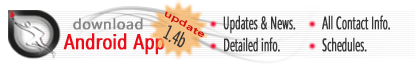
<style>
.page{position:relative;width:415px;height:64px;background:#ffffff}
.page>*{position:absolute;margin:0}
.t1{font:8.4px "SegoeUI";color:#d20f0f;font-weight:bold;scale:1.66 1}
.t2{font:17.8px "SegoeCondensed";color:#393738;font-weight:bold;scale:0.63 1}
.t3{font:14.2px "SegoeCondensed";color:#898787;font-weight:bold;scale:1.35 1}
.t4{font:20.1px "SegoeCondensed";color:#393737;font-weight:bold;scale:0.71 1}
.t5{font:21.2px "SegoeCondensed";color:#f10b16;font-weight:bold}
</style>
<div class="page">
<p class="t1" style="left:165px;top:11px;width:39px;height:26px;rotate:30deg">update</p>
<p class="t2" style="left:223px;top:15px;width:73px;height:19px">Updates &amp; News.</p>
<p class="t2" style="left:322px;top:15px;width:68px;height:15px">All Contact Info.</p>
<p class="t3" style="left:73px;top:18px;width:70px;height:12px">download</p>
<p class="t4" style="left:163px;top:25px;width:22px;height:23px;rotate:30deg">1.4b</p>
<p class="t5" style="left:63px;top:33px;width:102px;height:22px">Android App</p>
<p class="t2" style="left:224px;top:37px;width:56px;height:15px">Detailed info.</p>
<p class="t2" style="left:322px;top:37px;width:45px;height:15px">Schedules.</p>
</div>
